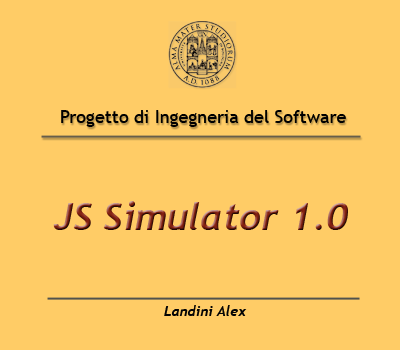
<style>
.page{position:relative;width:400px;height:350px;background:#ffcc66}
.page>*{position:absolute;margin:0}
.t1{font:18px "TrebuchetMS";color:#000000}
.t2{font:38.1px "Trebuchet-BoldItalic"}
.t3{font:14px "Trebuchet-BoldItalic";color:#040404}
</style>
<div class="page">
<p class="t1" style="left:61px;top:110px;width:285px;height:17px">Progetto di Ingegneria del Software</p>
<p class="t2" style="left:53px;top:201px;width:295px;height:29px">JS Simulator 1.0</p>
<p class="t3" style="left:164px;top:305px;width:83px;height:11px">Landini Alex</p>
</div>
